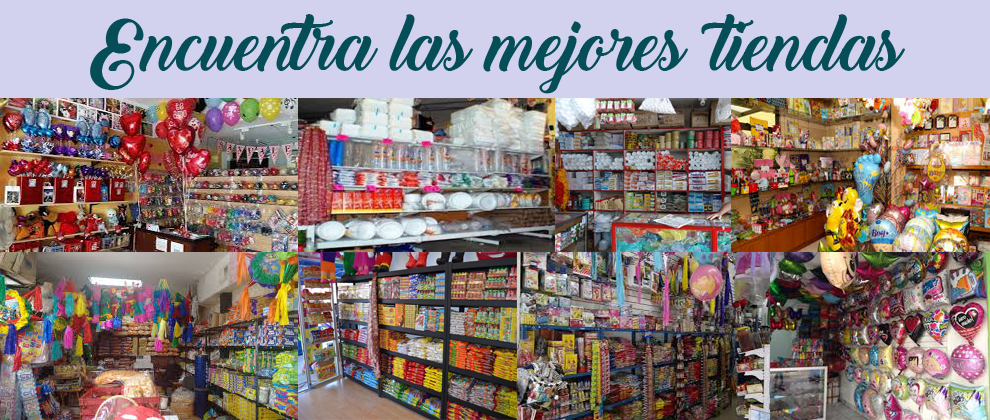
<style>
.page{position:relative;width:990px;height:420px}
.page>*{position:absolute;margin:0}
.t1{font:70px "BacktoBlackDemo";color:#054e57}
</style>
<div class="page">
<p class="t1" style="left:90px;top:14px;width:815px;height:80px">Encuentra las mejores tiendas</p>
</div>
